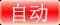
<style>
.page{position:relative;width:60px;height:25px}
.page>*{position:absolute;margin:0}
.t1{font:20px "SimSun";color:#ffffff}
</style>
<div class="page">
<p class="t1" style="left:12px;top:3px;width:36px;height:19px">自动</p>
</div>
